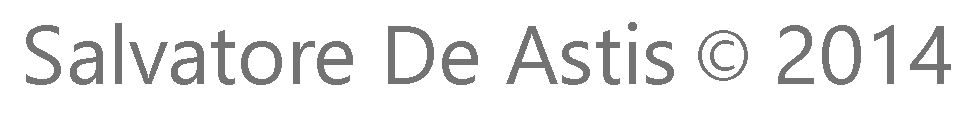
<style>
.page{position:relative;width:971px;height:120px;background:#ffffff}
.page>*{position:absolute;margin:0}
.t1{font:83.3px "SegoeUI";color:#737373}
.t2{font:83.3px "MyriadPro-Regular";color:#737373}
</style>
<div class="page">
<p class="t1" style="left:26px;top:22px;width:925px;height:63px">Salvatore De Astis<span class="t2"> ©</span> 2014</p>
</div>
